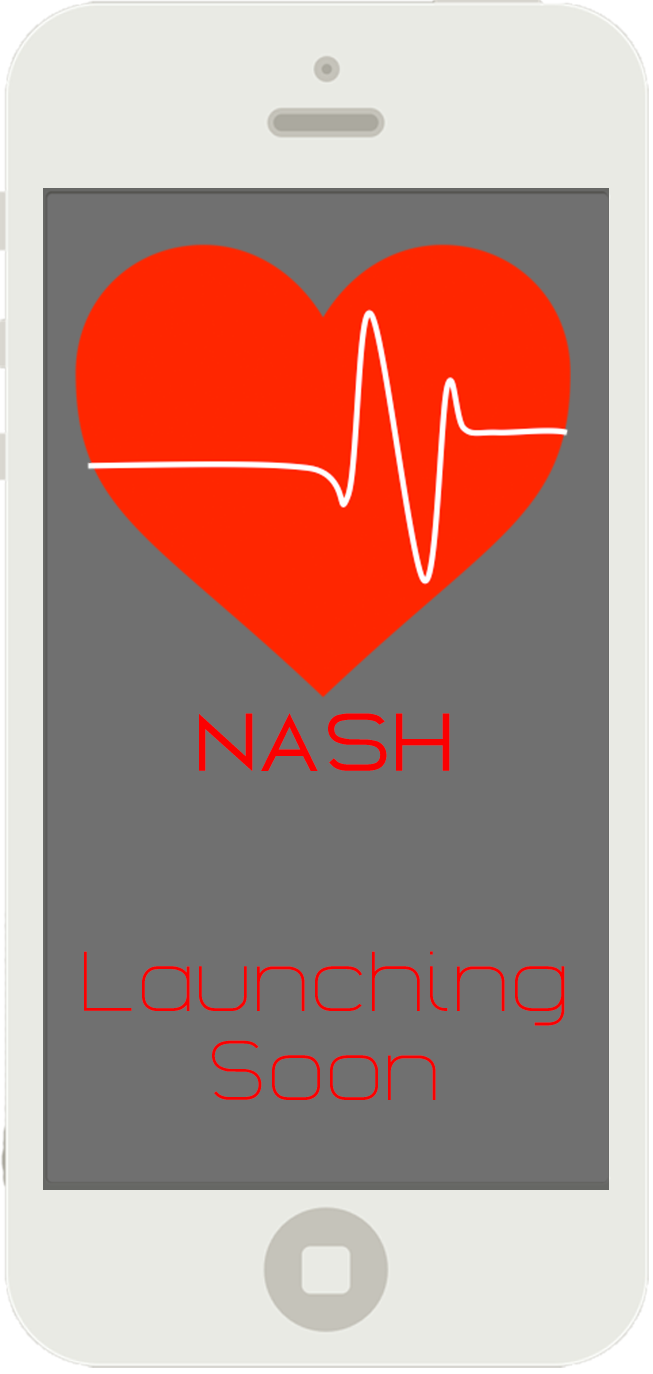
<style>
.page{position:relative;width:653px;height:1374px;background:#707070}
.page>*{position:absolute;margin:0}
.t1{font:72px "GearusBold";color:#fb0001}
.t2{font:74px "GearusLight";color:#fb0001}
</style>
<div class="page">
<p class="t1" style="left:199px;top:713px;width:251px;height:58px">NASH</p>
<p class="t2" style="left:84px;top:951px;width:481px;height:149px;text-align:center">Launching<br>Soon</p>
</div>
